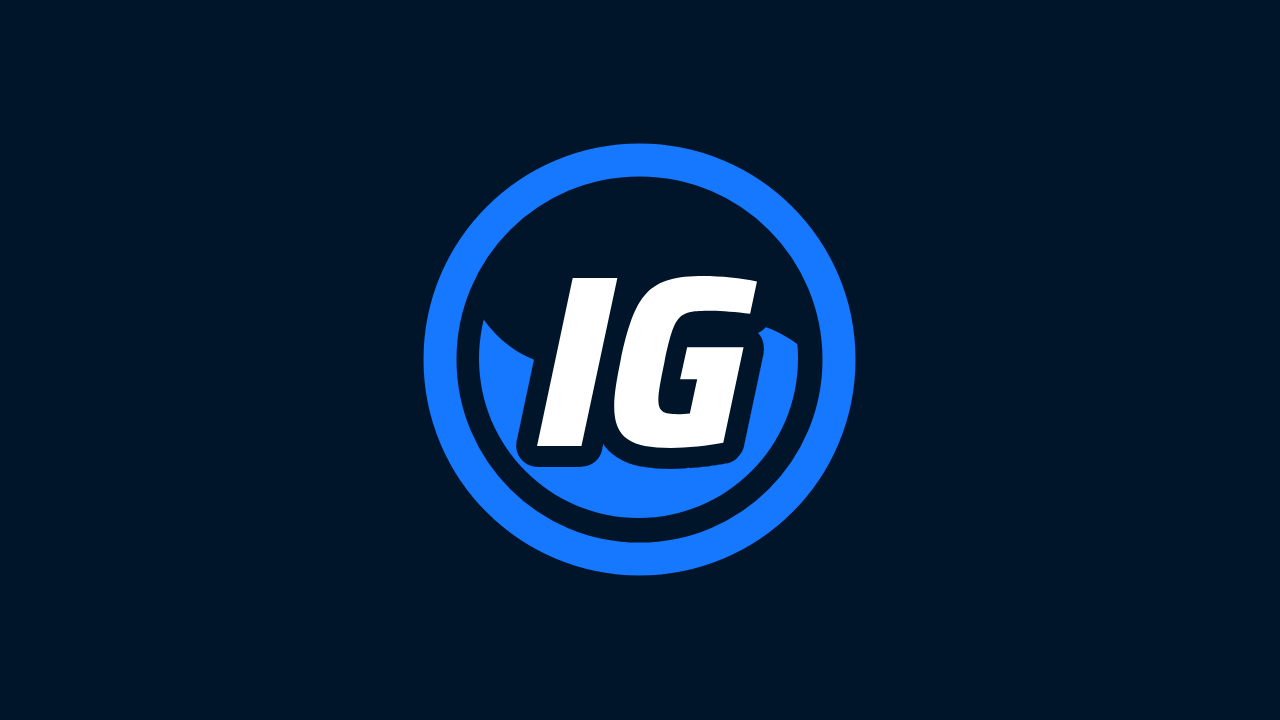
<style>
.page{position:relative;width:1280px;height:720px;background:#001529}
.page>*{position:absolute;margin:0}
.t1{font:244.1px "SairaSemiCondensed-ExtraBoldItalic";color:#ffffff}
</style>
<div class="page">
<p class="t1" style="left:537px;top:276px;width:220px;height:172px">IG</p>
</div>
